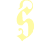
<style>
.page{position:relative;width:50px;height:42px;background:#ffffff}
.page>*{position:absolute;margin:0}
.t1{font:50px "GenzschEtHeyseAlternate";color:#fefaa3}
</style>
<div class="page">
<p class="t1" style="left:16px;top:0px;width:18px;height:42px">s</p>
</div>
